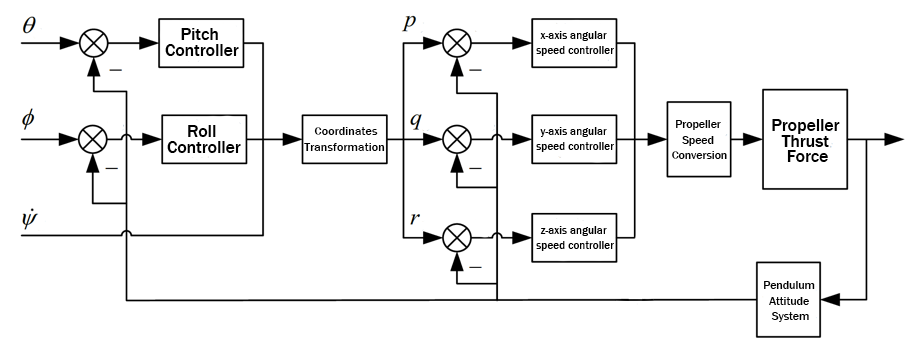
<style>
.page{position:relative;width:922px;height:357px;background:#ffffff}
.page>*{position:absolute;margin:0}
.t1{font:17.6px/15.2px "FranklinGothic-Medium";color:#000000}
.t2{font:11.3px/15.2px "FranklinGothic-Medium";color:#000000}
.t3{font:11.8px/15.2px "FranklinGothic-Medium";color:#000000}
.t4{font:12.2px/15.2px "FranklinGothic-Medium";color:#000000}
</style>
<div class="page">
<p class="t1" style="left:165px;top:28px;width:74px;height:28px;text-align:center">Pitch <br>Controller</p>
<p class="t2" style="left:536px;top:31px;width:78px;height:25px;text-align:center">x-axis angular <br>speed controller</p>
<p class="t1" style="left:167px;top:125px;width:74px;height:28px;text-align:center">Roll <br>Controller</p>
<p class="t3" style="left:672px;top:120px;width:55px;height:39px;text-align:center">Propeller <br>Speed <br>Conversion</p>
<p class="t1" style="left:772px;top:119px;width:68px;height:43px;text-align:center">Propeller <br>Thrust <br>Force</p>
<p class="t4" style="left:304px;top:127px;width:81px;height:24px;text-align:center">Coordinates<br>Transformation</p>
<p class="t2" style="left:536px;top:127px;width:78px;height:25px;text-align:center">y-axis angular <br>speed controller</p>
<p class="t2" style="left:536px;top:226px;width:78px;height:25px;text-align:center">z-axis angular <br>speed controller</p>
<p class="t3" style="left:764px;top:281px;width:51px;height:41px;text-align:center">Pendulum <br>Attitude <br>System</p>
</div>
